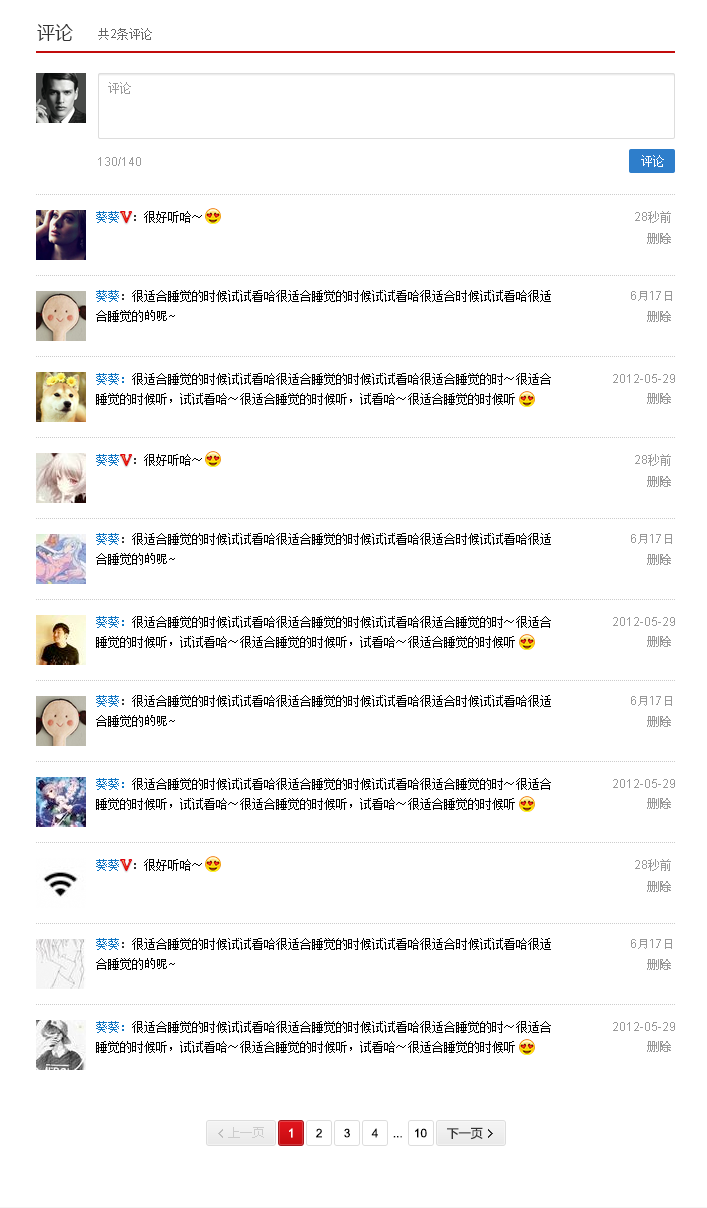
<style>
.page{position:relative;width:707px;height:1208px;background:#ffffff}
.page>*{position:absolute;margin:0}
.t1{font:18px "MicrosoftYaHei";color:#333333}
.t2{font:12px "SimSun";color:#666666}
.t3{font:12px "ArialMT";color:#666666}
.t4{font:12px "SimSun";color:#999999}
.t5{font:12px "ArialMT";color:#9b9b9b}
.t6{font:12px "SimSun";color:#ffffff}
.t7{font:12px "SimSun";color:#000000}
.t8{font:12px "SimSun";color:#0c73c2}
.t9{font:12px "SimSun";color:#333333}
.t10{font:12px "ArialMT";color:#999999}
.t11{font:12px "MicrosoftYaHei";color:#999999}
.t12{font:12px/20px "SimSun";color:#000000}
.t13{font:12px/20px "SimSun";color:#0c73c2}
.t14{font:12px/20px "SimSun";color:#333333}
.t15{font:12px/20px "AdobeHeitiStd-Regular";color:#000000}
.t16{font:12px "AdobeHeitiStd-Regular";color:#999999}
.t17{font:12px "MicrosoftYaHei";color:#cccccc}
.t18{font:12px "ArialMT";color:#ffffff}
.t19{font:12px "ArialMT";color:#000000}
.t20{font:12px "MicrosoftYaHei";color:#333333}
</style>
<div class="page">
<p class="t1" style="left:37px;top:24px;width:36px;height:17px">评论</p>
<p class="t2" style="left:98px;top:28px;width:54px;height:12px">共<span class="t3">2</span>条评论</p>
<p class="t4" style="left:108px;top:82px;width:23px;height:12px">评论</p>
<p class="t5" style="left:98px;top:157px;width:43px;height:9px">130/140</p>
<p class="t6" style="left:641px;top:155px;width:23px;height:12px">评论</p>
<p class="t7" style="left:96px;top:211px;width:106px;height:12px"><span class="t8">葵葵  </span><span class="t9">：</span>很好听哈～</p>
<p class="t10" style="left:635px;top:211px;width:36px;height:12px">28<span class="t4">秒前</span></p>
<p class="t11" style="left:647px;top:233px;width:24px;height:11px">删除</p>
<p class="t12" style="left:96px;top:290px;width:455px;height:32px"><span class="t13">葵葵</span><span class="t14">：</span>很适合睡觉的时候试试看哈很适合睡觉的时候试试看哈很适合时候试试看哈很适<br>合睡觉的<span class="t15">的呢~</span></p>
<p class="t16" style="left:631px;top:291px;width:41px;height:10px"><span class="t10">6</span>月17日</p>
<p class="t11" style="left:647px;top:311px;width:24px;height:11px">删除</p>
<p class="t12" style="left:96px;top:373px;width:455px;height:32px"><span class="t13">葵葵：</span>很适合睡觉的时候试试看哈很适合睡觉的时候试试看哈很适合睡觉的时～很适合<br>睡觉的时候听，试试看哈～很适合睡觉的时候听，试看哈～很适合睡觉的时候听</p>
<p class="t10" style="left:613px;top:374px;width:62px;height:9px">2012-05-29</p>
<p class="t11" style="left:647px;top:393px;width:24px;height:11px">删除</p>
<p class="t7" style="left:96px;top:454px;width:106px;height:12px"><span class="t8">葵葵  </span><span class="t9">：</span>很好听哈～</p>
<p class="t10" style="left:635px;top:454px;width:36px;height:12px">28<span class="t4">秒前</span></p>
<p class="t11" style="left:647px;top:476px;width:24px;height:11px">删除</p>
<p class="t12" style="left:96px;top:533px;width:455px;height:32px"><span class="t13">葵葵</span><span class="t14">：</span>很适合睡觉的时候试试看哈很适合睡觉的时候试试看哈很适合时候试试看哈很适<br>合睡觉的<span class="t15">的呢~</span></p>
<p class="t16" style="left:631px;top:534px;width:41px;height:10px"><span class="t10">6</span>月17日</p>
<p class="t11" style="left:647px;top:554px;width:24px;height:11px">删除</p>
<p class="t12" style="left:96px;top:616px;width:455px;height:32px"><span class="t13">葵葵：</span>很适合睡觉的时候试试看哈很适合睡觉的时候试试看哈很适合睡觉的时～很适合<br>睡觉的时候听，试试看哈～很适合睡觉的时候听，试看哈～很适合睡觉的时候听</p>
<p class="t10" style="left:613px;top:617px;width:62px;height:9px">2012-05-29</p>
<p class="t11" style="left:647px;top:636px;width:24px;height:11px">删除</p>
<p class="t12" style="left:96px;top:695px;width:455px;height:32px"><span class="t13">葵葵</span><span class="t14">：</span>很适合睡觉的时候试试看哈很适合睡觉的时候试试看哈很适合时候试试看哈很适<br>合睡觉的<span class="t15">的呢~</span></p>
<p class="t16" style="left:631px;top:696px;width:41px;height:10px"><span class="t10">6</span>月17日</p>
<p class="t11" style="left:647px;top:716px;width:24px;height:11px">删除</p>
<p class="t12" style="left:96px;top:778px;width:455px;height:32px"><span class="t13">葵葵：</span>很适合睡觉的时候试试看哈很适合睡觉的时候试试看哈很适合睡觉的时～很适合<br>睡觉的时候听，试试看哈～很适合睡觉的时候听，试看哈～很适合睡觉的时候听</p>
<p class="t10" style="left:613px;top:779px;width:62px;height:9px">2012-05-29</p>
<p class="t11" style="left:647px;top:798px;width:24px;height:11px">删除</p>
<p class="t7" style="left:96px;top:859px;width:106px;height:12px"><span class="t8">葵葵  </span><span class="t9">：</span>很好听哈～</p>
<p class="t10" style="left:635px;top:859px;width:36px;height:12px">28<span class="t4">秒前</span></p>
<p class="t11" style="left:647px;top:881px;width:24px;height:11px">删除</p>
<p class="t12" style="left:96px;top:938px;width:455px;height:32px"><span class="t13">葵葵</span><span class="t14">：</span>很适合睡觉的时候试试看哈很适合睡觉的时候试试看哈很适合时候试试看哈很适<br>合睡觉的<span class="t15">的呢~</span></p>
<p class="t16" style="left:631px;top:939px;width:41px;height:10px"><span class="t10">6</span>月17日</p>
<p class="t11" style="left:647px;top:959px;width:24px;height:11px">删除</p>
<p class="t12" style="left:96px;top:1021px;width:455px;height:32px"><span class="t13">葵葵：</span>很适合睡觉的时候试试看哈很适合睡觉的时候试试看哈很适合睡觉的时～很适合<br>睡觉的时候听，试试看哈～很适合睡觉的时候听，试看哈～很适合睡觉的时候听</p>
<p class="t10" style="left:613px;top:1022px;width:62px;height:9px">2012-05-29</p>
<p class="t11" style="left:647px;top:1041px;width:24px;height:11px">删除</p>
<p class="t17" style="left:228px;top:1127px;width:36px;height:11px">上一页</p>
<p class="t18" style="left:289px;top:1128px;width:4px;height:10px">1</p>
<p class="t19" style="left:316px;top:1128px;width:6px;height:10px">2</p>
<p class="t19" style="left:344px;top:1128px;width:6px;height:10px">3</p>
<p class="t19" style="left:371px;top:1128px;width:7px;height:10px">4</p>
<p class="t19" style="left:415px;top:1128px;width:12px;height:10px">10</p>
<p class="t20" style="left:447px;top:1127px;width:36px;height:13px">下一页</p>
<p class="t19" style="left:393px;top:1136px;width:9px;height:2px">...</p>
</div>
